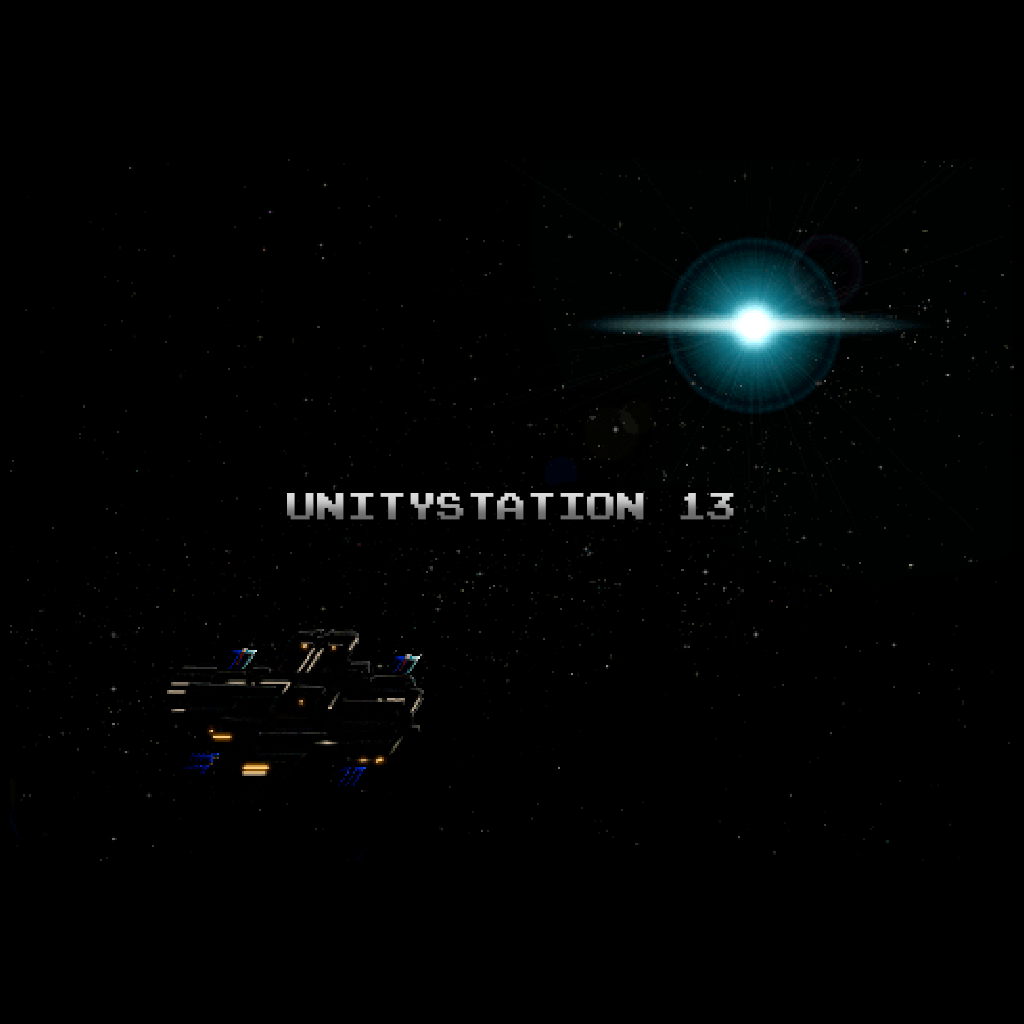
<style>
.page{position:relative;width:1024px;height:1024px;background:#000000}
.page>*{position:absolute;margin:0}
.t1{font:30px "PressStart2P-Regular"}
</style>
<div class="page">
<p class="t1" style="left:287px;top:493px;width:447px;height:27px">UNITYSTATION 13</p>
</div>
